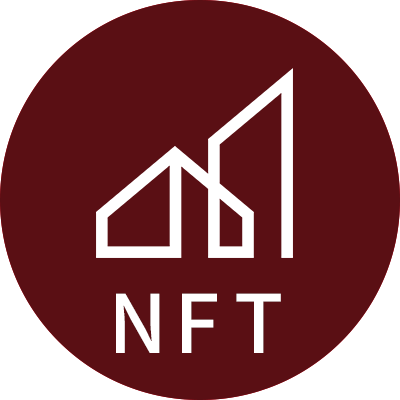
<style>
.page{position:relative;width:400px;height:400px;background:#5a0f14}
.page>*{position:absolute;margin:0}
.t1{font:80.7px "NotoSansKR-Medium";letter-spacing:0.08em;color:#ffffff}
</style>
<div class="page">
<p class="t1" style="left:116px;top:293px;width:165px;height:60px">NFT</p>
</div>
